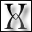
<style>
.page{position:relative;width:32px;height:32px;background:#ffffff}
.page>*{position:absolute;margin:0}
.t1{font:33.4px "Morpheus"}
</style>
<div class="page">
<p class="t1" style="left:4px;top:3px;width:23px;height:26px">X</p>
</div>
